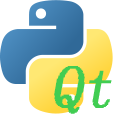
<style>
.page{position:relative;width:113px;height:114px;background:#ffffff}
.page>*{position:absolute;margin:0}
.t1{font:61px "·ÂËÎ";color:#41cd52;font-weight:bold;font-style:italic}
</style>
<div class="page">
<p class="t1" style="left:54px;top:66px;width:58px;height:48px">Qt</p>
</div>
